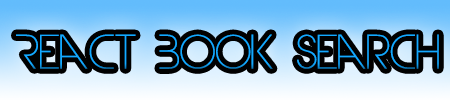
<style>
.page{position:relative;width:450px;height:100px;background:#000000}
.page>*{position:absolute;margin:0}
.t1{font:45.4px "DevilBreezeLight";color:#14a9ff}
</style>
<div class="page">
<p class="t1" style="left:16px;top:34px;width:423px;height:35px">React Book Search</p>
</div>
